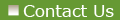
<style>
.page{position:relative;width:120px;height:20px;background:#669933}
.page>*{position:absolute;margin:0}
.t1{font:16.7px "Verdana";color:#ffffff}
</style>
<div class="page">
<p class="t1" style="left:23px;top:5px;width:91px;height:12px">Contact Us</p>
</div>
